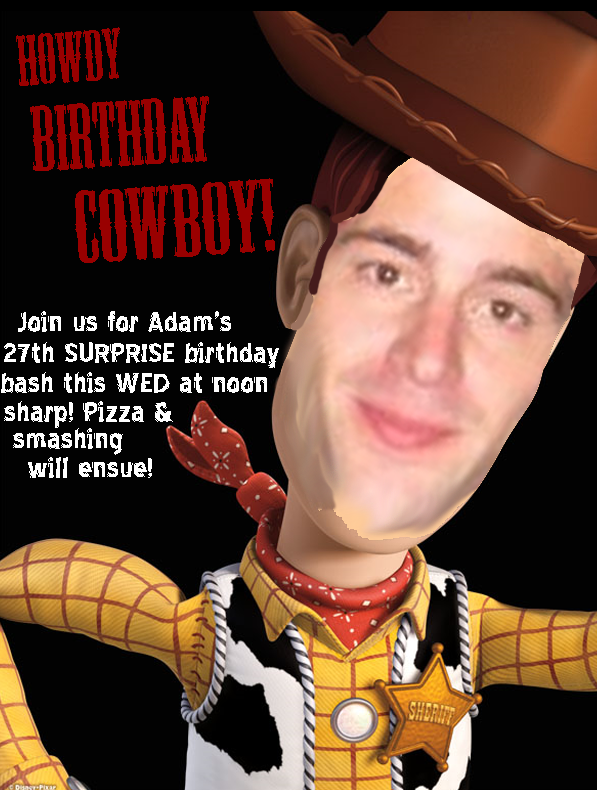
<style>
.page{position:relative;width:597px;height:790px;background:#020202}
.page>*{position:absolute;margin:0}
.t1{font:66.7px "MesquiteStd";color:#990000}
.t2{font:86px "MesquiteStd";color:#990000}
.t3{font:95.6px "MesquiteStd";color:#990000;scale:1.12 1}
.t4{font:33.3px "BlueHighwayLinocut";color:#ffffff}
</style>
<div class="page">
<p class="t1" style="left:16px;top:27px;width:104px;height:59px;rotate:-4deg">HOWDY</p>
<p class="t2" style="left:30px;top:96px;width:179px;height:75px;rotate:-3deg">BIRTHDAY</p>
<p class="t3" style="left:75px;top:178px;width:200px;height:85px;rotate:-4deg">COWBOY!</p>
<p class="t4" style="left:18px;top:311px;width:213px;height:21px">Join us for Adam’s</p>
<p class="t4" style="left:4px;top:342px;width:275px;height:26px">27th SURPRISE birthday</p>
<p class="t4" style="left:1px;top:372px;width:266px;height:21px">bash this WED at noon</p>
<p class="t4" style="left:4px;top:401px;width:169px;height:27px">sharp! Pizza &amp;</p>
<p class="t4" style="left:13px;top:428px;width:110px;height:27px">smashing</p>
<p class="t4" style="left:28px;top:457px;width:124px;height:21px">will ensue!</p>
</div>
